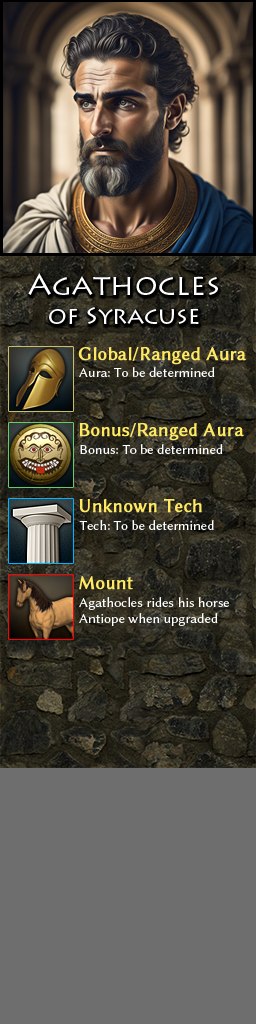
<style>
.page{position:relative;width:256px;height:1024px;background:#6e6e6e}
.page>*{position:absolute;margin:0}
.t1{font:24px "LithosPro-Regular";color:#ffffff}
.t2{font:30px "LithosPro-Regular";color:#ffffff}
.t3{font:19px "LinBiolinumO";color:#ffe963;font-weight:bold}
.t4{font:14px "LinBiolinumO";color:#ffffff}
</style>
<div class="page">
<p class="t1" style="left:28px;top:273px;width:190px;height:51px;text-align:center"><span class="t2">Agathocles<br></span>of Syracuse</p>
<p class="t3" style="left:78px;top:347px;width:168px;height:18px">Global/Ranged Aura</p>
<p class="t4" style="left:79px;top:367px;width:136px;height:10px">Aura: To be determined</p>
<p class="t3" style="left:79px;top:423px;width:165px;height:18px">Bonus/Ranged Aura</p>
<p class="t4" style="left:80px;top:444px;width:143px;height:10px">Bonus: To be determined</p>
<p class="t3" style="left:79px;top:498px;width:123px;height:15px">Unknown Tech</p>
<p class="t4" style="left:79px;top:520px;width:135px;height:10px">Tech: To be determined</p>
<p class="t3" style="left:79px;top:576px;width:54px;height:14px">Mount</p>
<p class="t4" style="left:79px;top:597px;width:150px;height:29px">Agathocles rides his horse <br>Antiope when upgraded</p>
</div>
